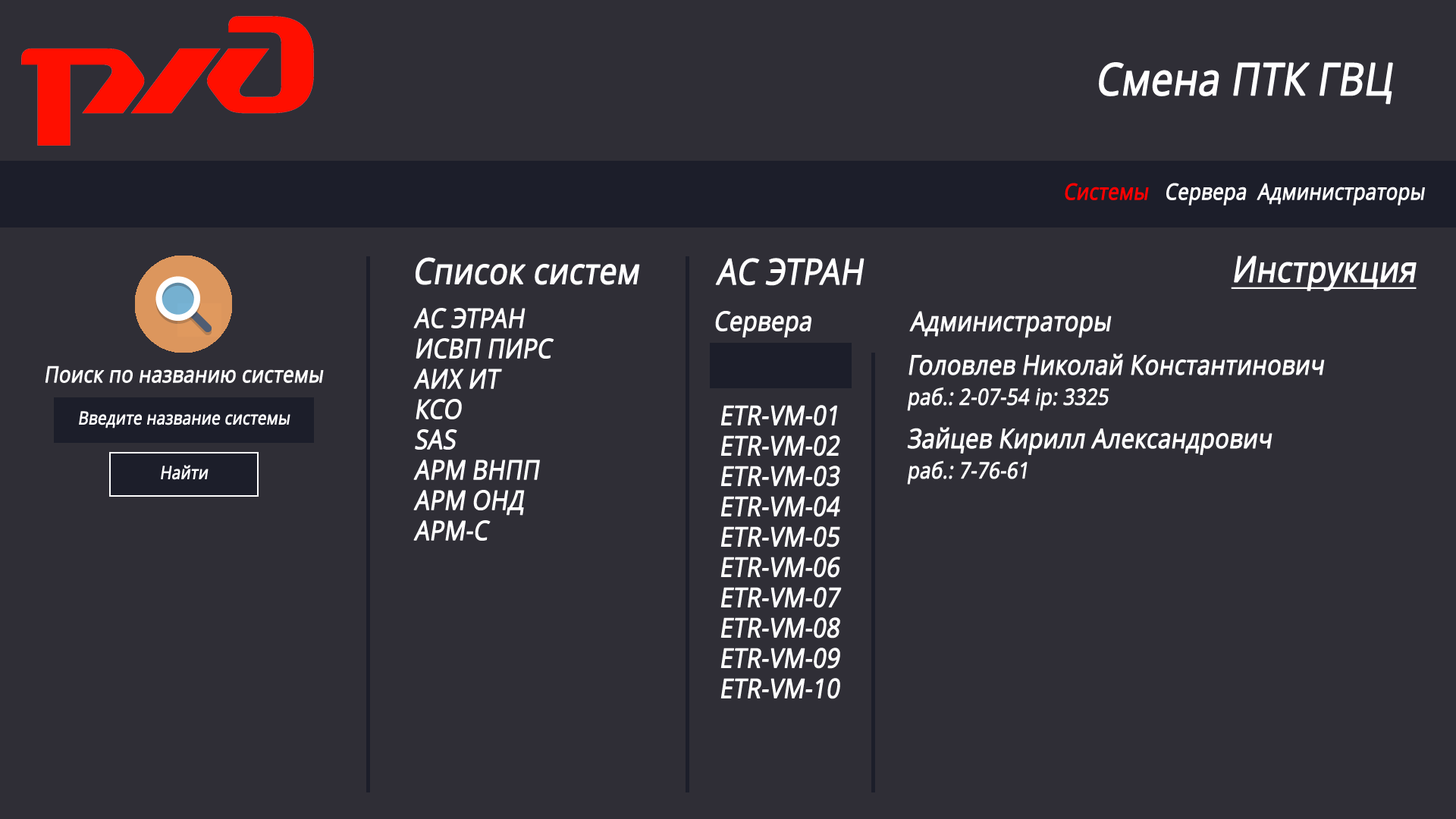
<style>
.page{position:relative;width:1456px;height:819px;background:#2f2e36}
.page>*{position:absolute;margin:0}
.t1{font:44.6px "OpenSans";letter-spacing:-0.01em;color:#ffffff;font-weight:bold;font-style:italic;scale:0.87 1}
.t2{font:22.3px "OpenSans";letter-spacing:-0.01em;color:#ffffff;font-weight:bold;font-style:italic;scale:0.87 1}
.t3{font:22.3px "OpenSans";letter-spacing:-0.01em;color:#ff0000;font-weight:bold;font-style:italic;scale:0.87 1}
.t4{font:35.7px "OpenSans";letter-spacing:-0.01em;color:#ffffff;font-weight:bold;font-style:italic;scale:0.87 1}
.t5{font:35.7px "OpenSans";letter-spacing:-0.01em;color:#ffffff;font-weight:bold;font-style:italic;text-decoration:underline;scale:0.87 1}
.t6{font:26.8px/30.3px "OpenSans";letter-spacing:-0.01em;color:#ffffff;font-weight:bold;font-style:italic;scale:0.87 1}
.t7{font:26.8px "OpenSans";letter-spacing:-0.01em;color:#ffffff;font-weight:bold;font-style:italic;scale:0.87 1}
.t8{font:22.3px/30.3px "OpenSans";letter-spacing:-0.01em;color:#ffffff;font-weight:bold;font-style:italic;scale:0.87 1}
.t9{font:17.8px "OpenSans";letter-spacing:-0.01em;color:#ffffff;font-weight:bold;font-style:italic;scale:0.87 1}
</style>
<div class="page">
<p class="t1" style="left:1099px;top:62px;width:294px;height:43px">Смена ПТК ГВЦ</p>
<p class="t2" style="left:1065px;top:183px;width:360px;height:23px"><span class="t3">Системы</span>   Сервера  Администраторы</p>
<p class="t4" style="left:416px;top:257px;width:224px;height:28px">Список систем</p>
<p class="t4" style="left:715px;top:258px;width:149px;height:28px">АС ЭТРАН</p>
<p class="t5" style="left:1231px;top:256px;width:186px;height:35px">Инструкция</p>
<p class="t6" style="left:413px;top:308px;width:141px;height:233px;text-align:right">АС ЭТРАН<br>ИСВП ПИРС<br>АИХ ИТ<br>КСО<br>SAS<br>АРМ ВНПП<br>АРМ ОНД<br>АРМ-С</p>
<p class="t7" style="left:715px;top:311px;width:96px;height:26px">Сервера</p>
<p class="t7" style="left:909px;top:311px;width:203px;height:27px">Администраторы</p>
<p class="t6" style="left:907px;top:353px;width:418px;height:58px;text-align:right">Головлев Николай Константинович<br><span class="t8">раб.: 2-07-54 ip: 3325</span></p>
<p class="t2" style="left:45px;top:366px;width:279px;height:17px">Поиск по названию системы</p>
<p class="t9" style="left:79px;top:411px;width:211px;height:17px">Введите название системы</p>
<p class="t6" style="left:720px;top:405px;width:122px;height:294px;text-align:center">ETR-VM-01<br>ETR-VM-02<br>ETR-VM-03<br>ETR-VM-04<br>ETR-VM-05<br>ETR-VM-06<br>ETR-VM-07<br>ETR-VM-08<br>ETR-VM-09<br>ETR-VM-10</p>
<p class="t6" style="left:907px;top:427px;width:365px;height:58px;text-align:right">Зайцев Кирилл Александрович<br><span class="t8">раб.: 7-76-61</span></p>
<p class="t9" style="left:161px;top:465px;width:48px;height:15px">Найти</p>
</div>
